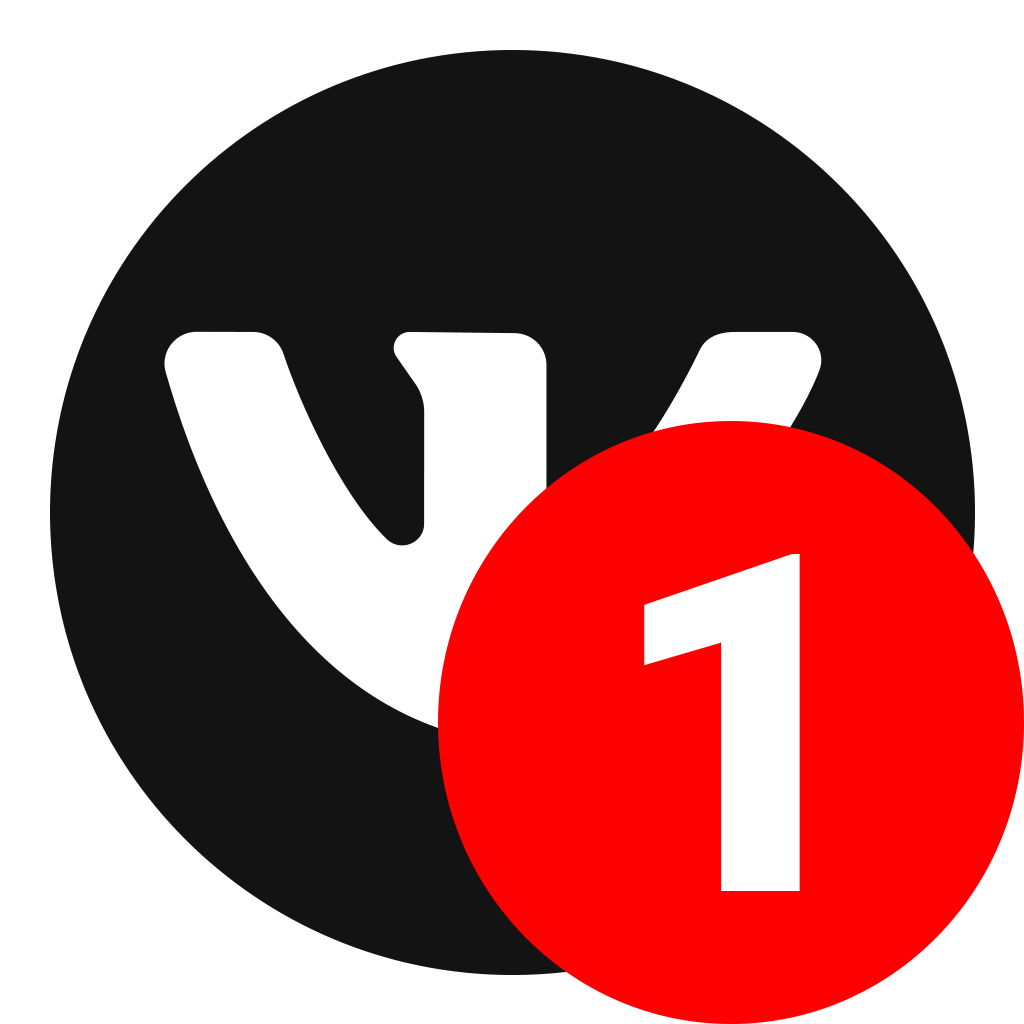
<style>
.page{position:relative;width:1024px;height:1024px;background:#ffffff}
.page>*{position:absolute;margin:0}
.t1{font:474.3px "Roboto-Black";color:#ffffff}
</style>
<div class="page">
<p class="t1" style="left:644px;top:554px;width:156px;height:337px">1</p>
</div>
